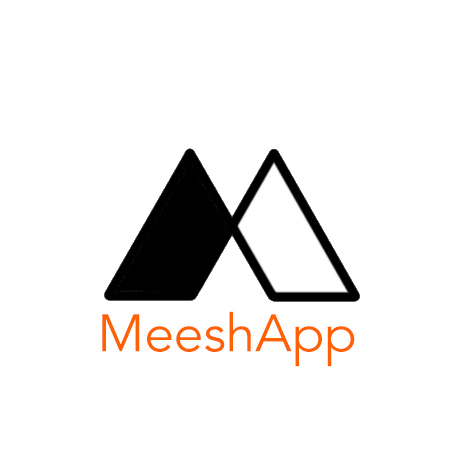
<style>
.page{position:relative;width:466px;height:466px;background:#ffffff}
.page>*{position:absolute;margin:0}
.t1{font:52.2px "Avenir-Book";color:#ff6103}
</style>
<div class="page">
<p class="t1" style="left:102px;top:311px;width:253px;height:56px">MeeshApp</p>
</div>
